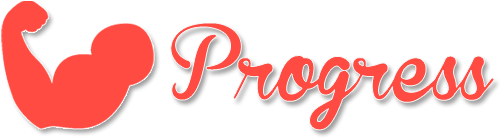
<style>
.page{position:relative;width:501px;height:138px;background:#ffffff}
.page>*{position:absolute;margin:0}
.t1{font:72px "BrannbollFet";letter-spacing:-0.025em;color:#ff4b41;font-weight:bold}
</style>
<div class="page">
<p class="t1" style="left:170px;top:23px;width:324px;height:107px">Progress</p>
</div>
